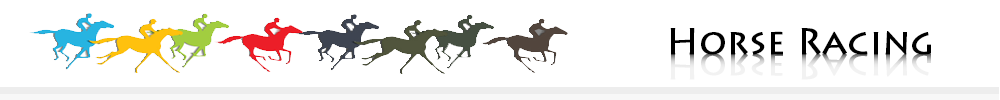
<style>
.page{position:relative;width:1000px;height:100px;background:#ffffff}
.page>*{position:absolute;margin:0}
.t1{font:35.5px "LithosPro-Regular";color:#000000;font-weight:bold}
.t2{font:35.5px "LithosPro-Regular";font-weight:bold}
</style>
<div class="page">
<p class="t1" style="left:670px;top:28px;width:261px;height:27px">Horse Racing</p>
<p class="t2" style="left:670px;top:53px;width:261px;height:27px">Horse Racing</p>
</div>
